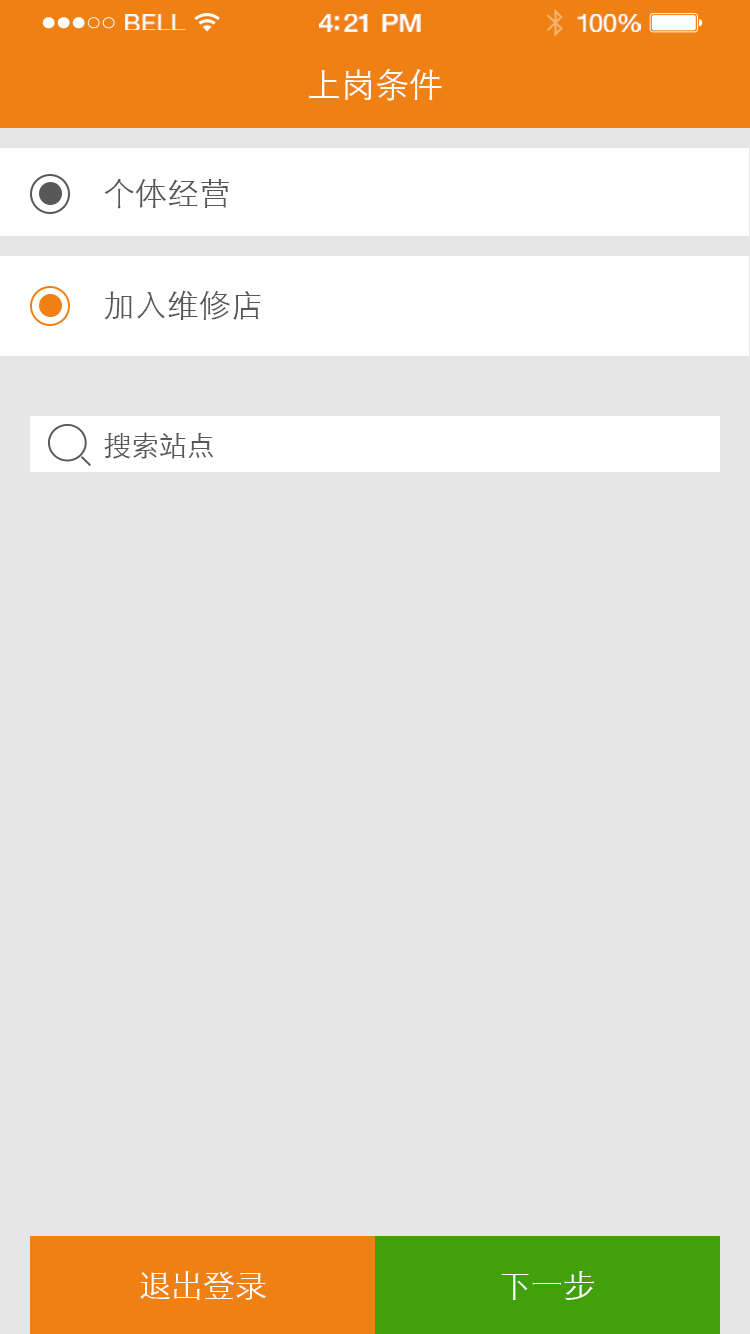
<style>
.page{position:relative;width:750px;height:1334px;background:#e6e6e6}
.page>*{position:absolute;margin:0}
.t1{font:23.3px "HelveticaNeue";letter-spacing:0.02em;color:#ffffff;scale:1.06 1}
.t2{font:25.3px "HelveticaNeue-Medium";letter-spacing:-0.02em;color:#ffffff;scale:1.06 1}
.t3{font:24.3px "HelveticaNeue";letter-spacing:-0.02em;color:#ffffff;scale:1.06 1}
.t4{font:34px "STXihei";color:#ffffff}
.t5{font:32px "STXihei";color:#595757}
.t6{font:28px "STXihei";color:#595757}
.t7{font:32px "STXihei";color:#ffffff}
</style>
<div class="page">
<p class="t1" style="left:125px;top:14px;width:61px;height:16px">BELL</p>
<p class="t2" style="left:319px;top:14px;width:102px;height:18px">4:21 PM</p>
<p class="t3" style="left:577px;top:14px;width:64px;height:18px">100%</p>
<p class="t4" style="left:309px;top:69px;width:133px;height:32px">上岗条件</p>
<p class="t5" style="left:104px;top:178px;width:125px;height:31px">个体经营</p>
<p class="t5" style="left:104px;top:290px;width:157px;height:30px">加入维修店</p>
<p class="t6" style="left:104px;top:432px;width:109px;height:27px">搜索站点</p>
<p class="t7" style="left:140px;top:1271px;width:126px;height:29px">退出登录</p>
<p class="t7" style="left:501px;top:1271px;width:93px;height:29px">下一步</p>
</div>
